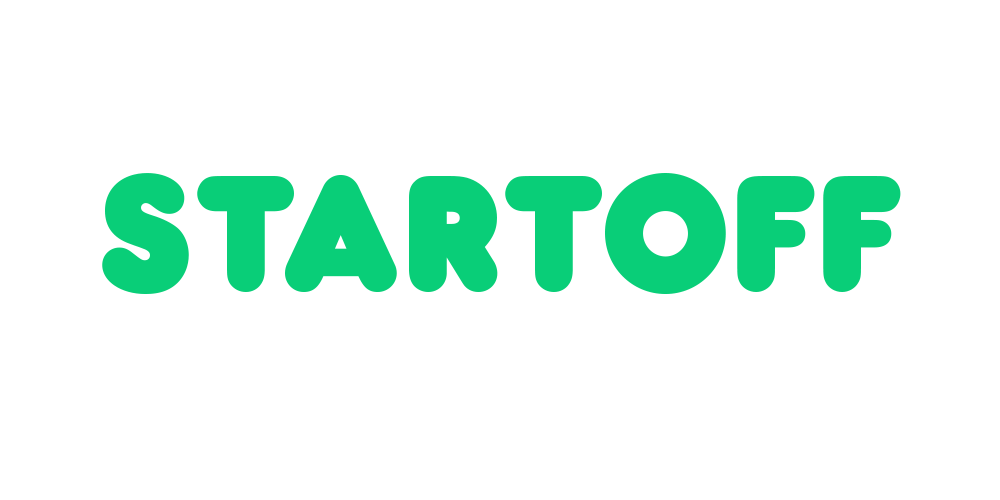
<style>
.page{position:relative;width:1000px;height:500px;background:#ffffff}
.page>*{position:absolute;margin:0}
.t1{font:172px "FrankfurterStd";color:#09ce78}
</style>
<div class="page">
<p class="t1" style="left:102px;top:173px;width:799px;height:122px">Startoff</p>
</div>
